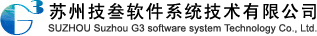
<style>
.page{position:relative;width:317px;height:36px;background:#ffffff}
.page>*{position:absolute;margin:0}
.t1{font:18px "SimHei";letter-spacing:0.075em;color:#000000}
.t2{font:10px "ArialMT";letter-spacing:0.01em;color:#333333}
</style>
<div class="page">
<p class="t1" style="left:49px;top:3px;width:267px;height:17px">苏州技叁软件系统技术有限公司</p>
<p class="t2" style="left:48px;top:24px;width:269px;height:10px">SUZHOU Suzhou G3 software system Technology Co., Ltd.</p>
</div>
